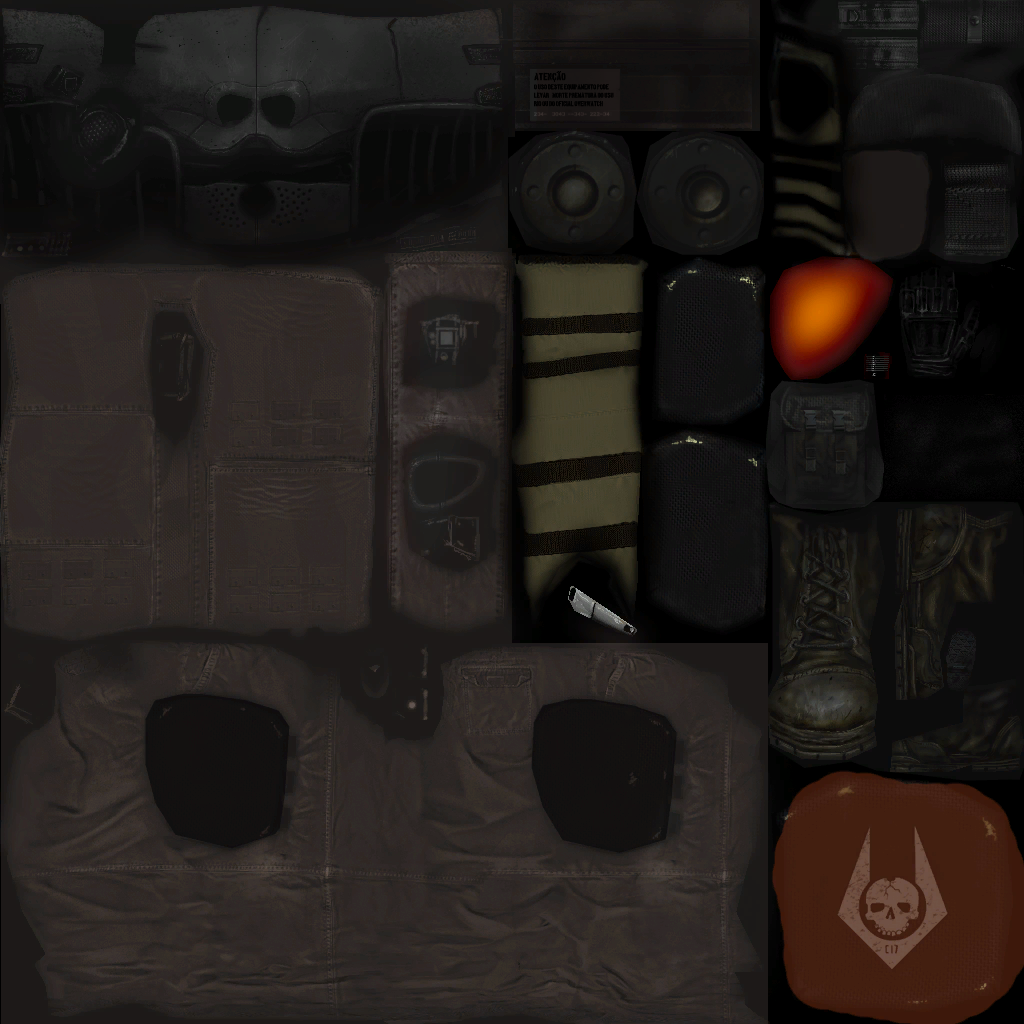
<style>
.page{position:relative;width:1024px;height:1024px}
.page>*{position:absolute;margin:0}
.t1{font:8.1px "BostonTraffic";letter-spacing:-0.03em;color:#000000;text-transform:uppercase;font-weight:bold}
.t2{font:5.5px/8.4px "BostonTraffic";letter-spacing:-0.03em;color:#000000;text-transform:uppercase}
</style>
<div class="page">
<p class="t1" style="left:534px;top:72px;width:32px;height:9px">atencao</p>
<p class="t2" style="left:534px;top:84px;width:80px;height:23px">O USO DESTE EQUIPAMENTO PODE <br>LEVAR À MORTE PREMATURA DO USU<br>RIO OU DO OFICIAL OVERWATCH</p>
</div>
